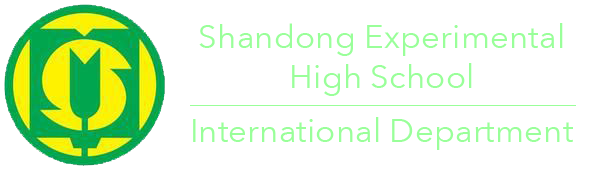
<style>
.page{position:relative;width:600px;height:170px;background:#ffffff}
.page>*{position:absolute;margin:0}
.t1{font:33.3px "AvenirNext-Regular";color:#99ff99}
</style>
<div class="page">
<p class="t1" style="left:199px;top:23px;width:364px;height:73px;text-align:center">Shandong Experimental High School</p>
<p class="t1" style="left:193px;top:117px;width:380px;height:33px">International Department</p>
</div>
